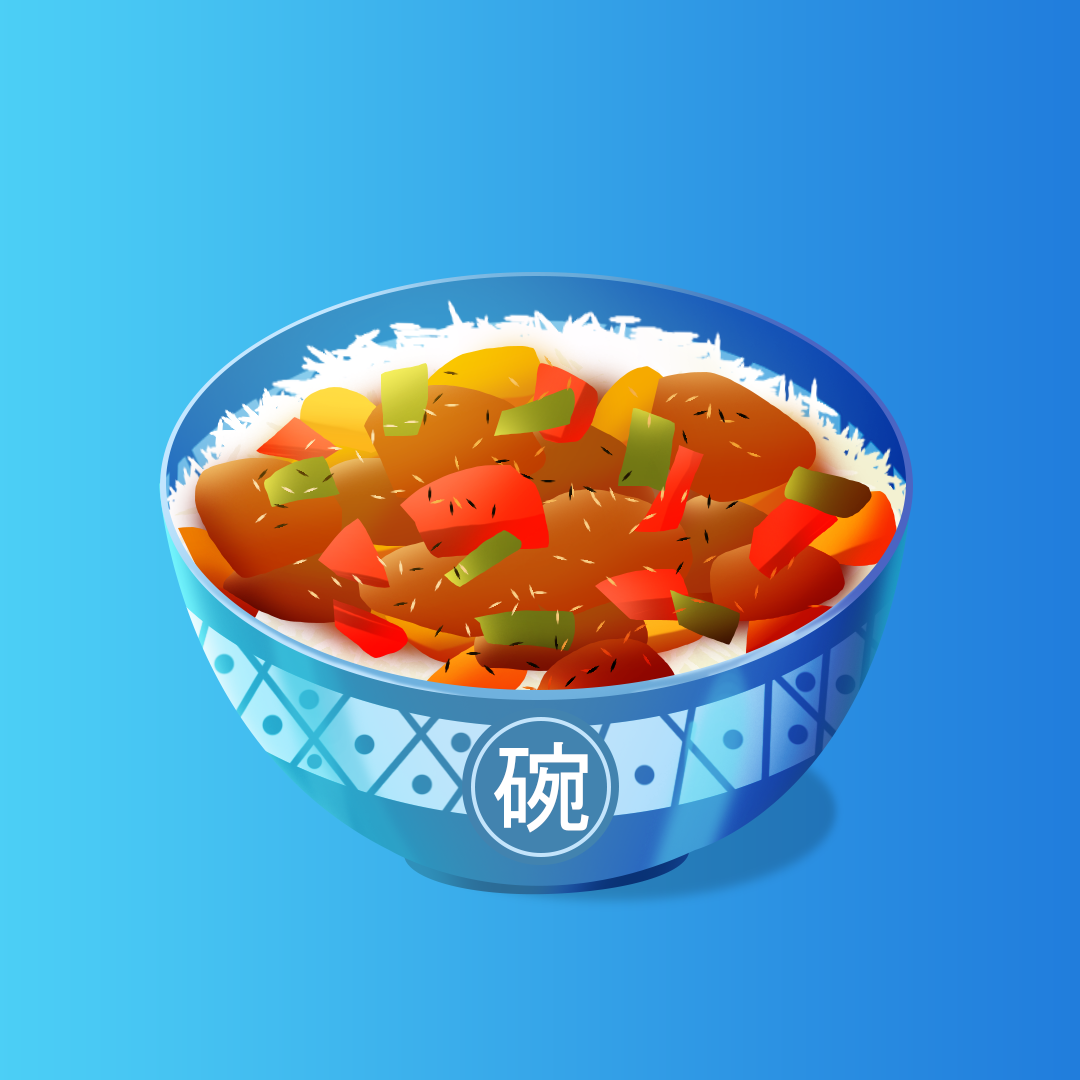
<style>
.page{position:relative;width:1080px;height:1080px}
.page>*{position:absolute;margin:0}
.t1{font:100.6px "MS-Gothic";color:#ffffff}
</style>
<div class="page">
<p class="t1" style="left:494px;top:742px;width:95px;height:91px">碗</p>
</div>
